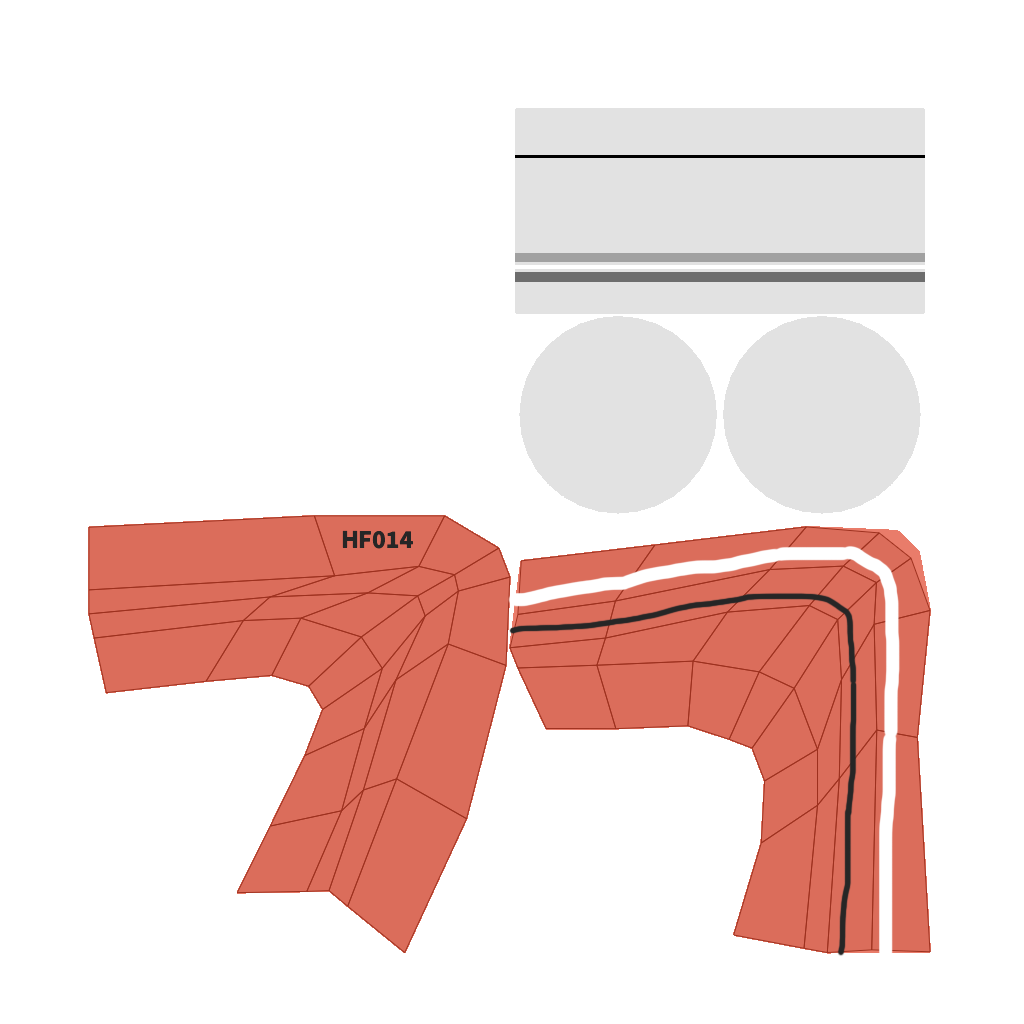
<style>
.page{position:relative;width:1024px;height:1024px;background:#ffffff}
.page>*{position:absolute;margin:0}
.t1{font:22.5px "NotoSansCJKkr-Black";color:#262626}
</style>
<div class="page">
<p class="t1" style="left:342px;top:530px;width:71px;height:19px">HF014</p>
</div>
